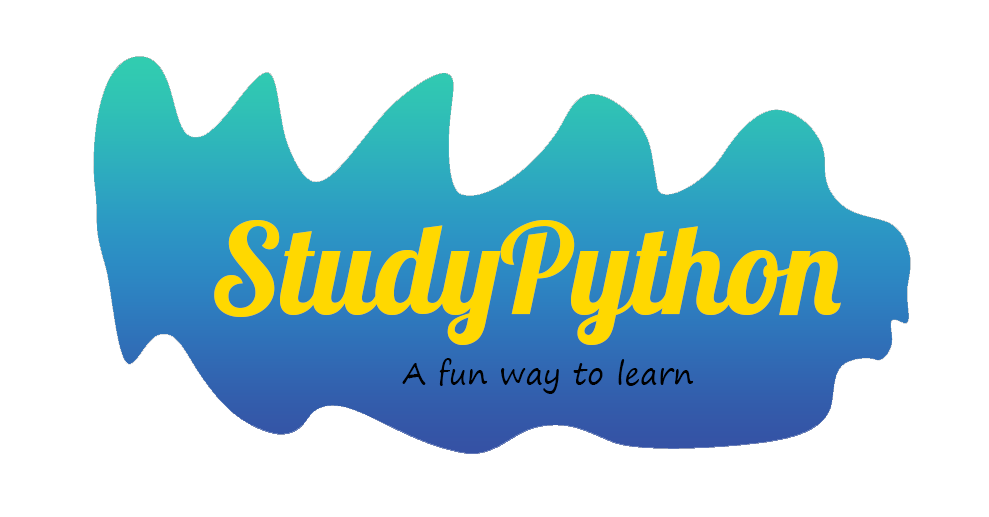
<style>
.page{position:relative;width:989px;height:517px;background:#ffffff}
.page>*{position:absolute;margin:0}
.t1{font:125px "Lobster-Regular";color:#ffd800}
.t2{font:30px "SegoePrint";color:#000000}
</style>
<div class="page">
<p class="t1" style="left:214px;top:220px;width:627px;height:125px">StudyPython</p>
<p class="t2" style="left:402px;top:358px;width:292px;height:36px">A fun way to learn</p>
</div>
